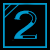
<style>
.page{position:relative;width:50px;height:50px;background:#000000}
.page>*{position:absolute;margin:0}
.t1{font:33.3px "ABitEmpty";color:#0099cc}
</style>
<div class="page">
<p class="t1" style="left:14px;top:10px;width:23px;height:29px">2</p>
</div>
